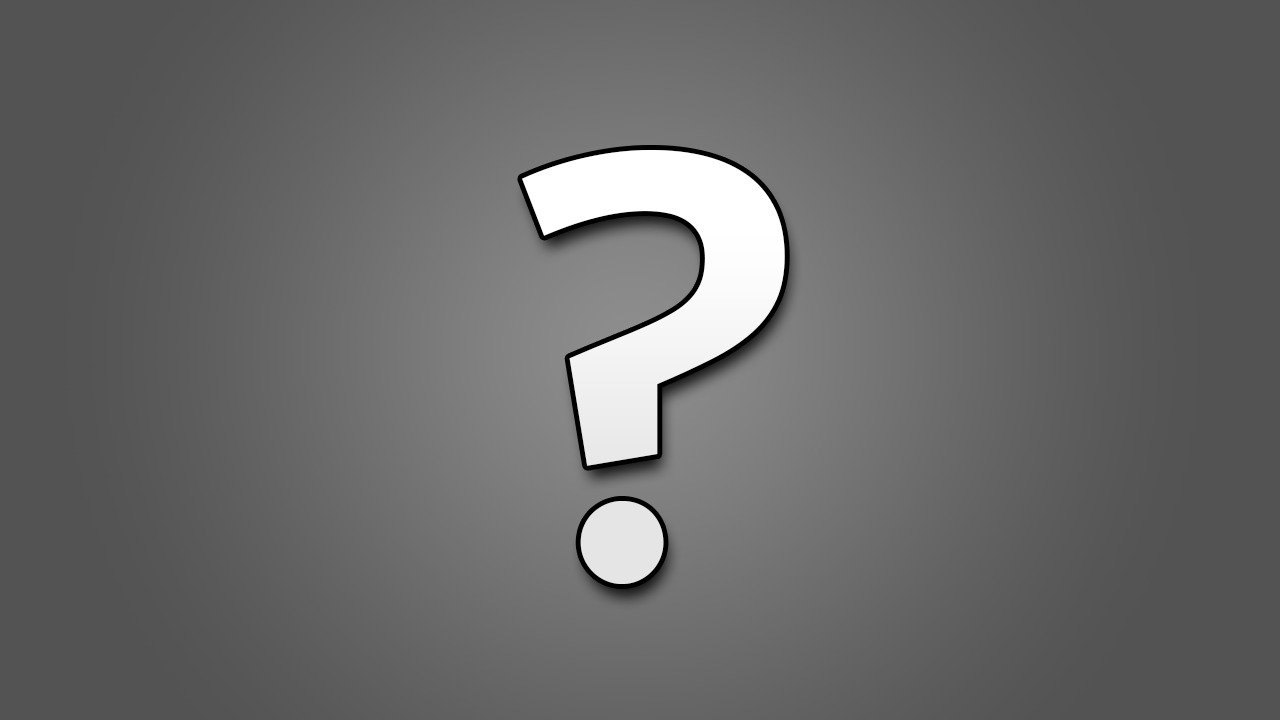
<style>
.page{position:relative;width:1280px;height:720px}
.page>*{position:absolute;margin:0}
.t1{font:600px "Alef-Bold";letter-spacing:0.04em;color:#ffffff}
</style>
<div class="page">
<p class="t1" style="left:522px;top:150px;width:263px;height:434px">?</p>
</div>
